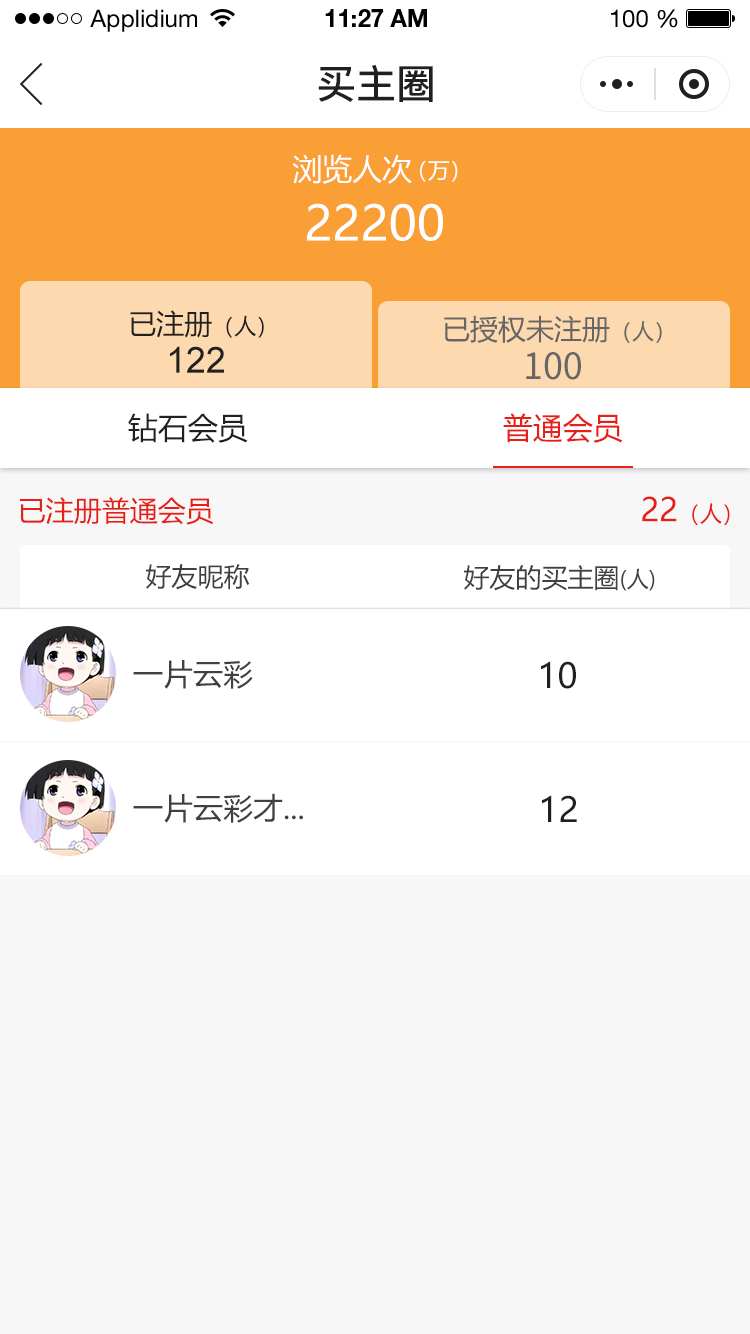
<style>
.page{position:relative;width:750px;height:1334px;background:#f7f7f7}
.page>*{position:absolute;margin:0}
.t1{font:24px "HelveticaNeueLTStd-Roman";color:#000000}
.t2{font:24px "HelveticaNeueLTStd-Bd";color:#000000}
.t3{font:40px "PingFang-SC-Bold";color:#202020;text-transform:uppercase}
.t4{font:30px "MicrosoftYaHei";color:#ffffff;text-transform:uppercase}
.t5{font:22px "MicrosoftYaHei";color:#ffffff;text-transform:uppercase}
.t6{font:48px "MicrosoftYaHei";color:#ffffff;text-transform:uppercase}
.t7{font:28px "MicrosoftYaHei";color:#202020;text-transform:uppercase}
.t8{font:22px "MicrosoftYaHei";color:#202020;text-transform:uppercase}
.t9{font:28.1px "MicrosoftYaHei";color:#666666;text-transform:uppercase}
.t10{font:22.1px "MicrosoftYaHei";color:#666666;text-transform:uppercase}
.t11{font:36px "ArialMT";color:#202020;text-transform:uppercase}
.t12{font:36.1px "SourceHanSansCN-Regular";color:#666666;text-transform:uppercase}
.t13{font:30px "MicrosoftYaHei";color:#202020;text-transform:uppercase}
.t14{font:30px "MicrosoftYaHei";color:#e61f18;text-transform:uppercase}
.t15{font:28px "MicrosoftYaHei";color:#e61f18;text-transform:uppercase}
.t16{font:22px "MicrosoftYaHei";color:#e61f18;text-transform:uppercase}
.t17{font:32px "MicrosoftYaHei";color:#e61f18;text-transform:uppercase}
.t18{font:26px "MicrosoftYaHei";color:#404040;text-transform:uppercase}
.t19{font:22px "MicrosoftYaHei";color:#404040;text-transform:uppercase}
.t20{font:30px "MicrosoftYaHei";color:#404040;text-transform:uppercase}
.t21{font:34px "MicrosoftYaHei";color:#202020;text-transform:uppercase}
</style>
<div class="page">
<p class="t1" style="left:90px;top:9px;width:107px;height:23px">Applidium</p>
<p class="t2" style="left:325px;top:9px;width:102px;height:18px">11:27 AM</p>
<p class="t1" style="left:611px;top:9px;width:67px;height:19px">100 %</p>
<p class="t3" style="left:318px;top:64px;width:115px;height:38px">买主圈</p>
<p class="t4" style="left:292px;top:154px;width:120px;height:30px">浏览人次</p>
<p class="t5" style="left:420px;top:161px;width:38px;height:21px">（万）</p>
<p class="t6" style="left:307px;top:203px;width:136px;height:38px">22200</p>
<p class="t7" style="left:130px;top:310px;width:134px;height:28px">已注册<span class="t8">（人）</span></p>
<p class="t9" style="left:444px;top:315px;width:218px;height:28px">已授权未注册<span class="t10">（人）</span></p>
<p class="t11" style="left:170px;top:346px;width:54px;height:27px">122</p>
<p class="t12" style="left:526px;top:352px;width:55px;height:28px">100</p>
<p class="t13" style="left:128px;top:413px;width:120px;height:30px">钻石会员</p>
<p class="t14" style="left:503px;top:413px;width:120px;height:30px">普通会员</p>
<p class="t15" style="left:20px;top:497px;width:194px;height:28px">已注册普通会员</p>
<p class="t16" style="left:642px;top:496px;width:88px;height:29px"><span class="t17">22</span>（人）</p>
<p class="t18" style="left:146px;top:564px;width:104px;height:26px">好友昵称</p>
<p class="t18" style="left:464px;top:565px;width:191px;height:26px">好友的买主圈<span class="t19">(人)</span></p>
<p class="t20" style="left:133px;top:660px;width:120px;height:29px">一片云彩</p>
<p class="t21" style="left:541px;top:661px;width:35px;height:28px">10</p>
<p class="t20" style="left:133px;top:793px;width:170px;height:30px">一片云彩才...</p>
<p class="t21" style="left:542px;top:795px;width:35px;height:27px">12</p>
</div>
